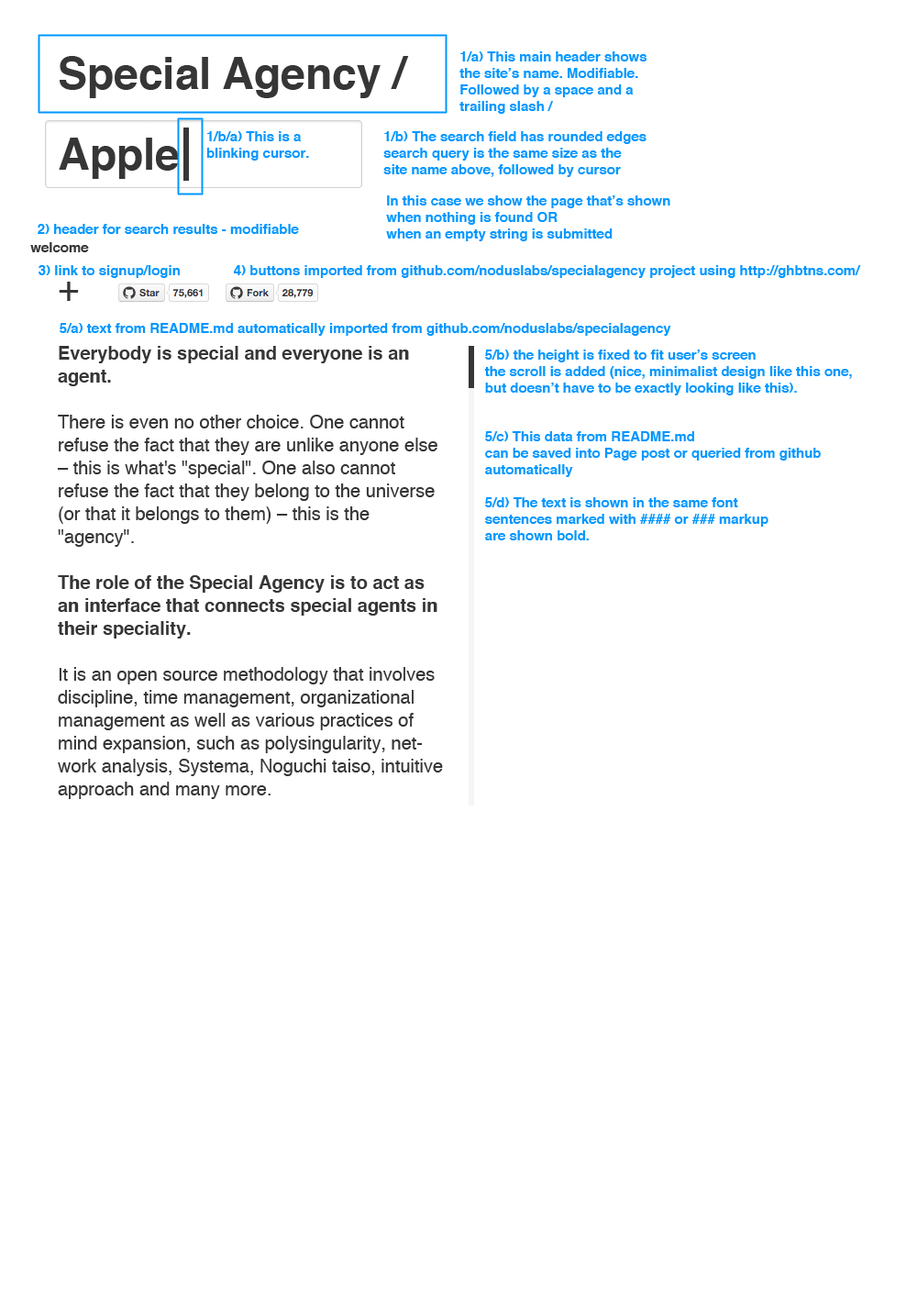
<style>
.page{position:relative;width:917px;height:1300px;background:#ffffff}
.page>*{position:absolute;margin:0}
.t1{font:13.8px "Helvetica-Bold";color:#0096ff}
.t2{font:44px "Helvetica-Bold";color:#363636}
.t3{font:13.8px "Helvetica-Bold";color:#363636}
.t4{font:36.7px "Helvetica";color:#363636}
.t5{font:18.3px/22.9px "Helvetica";color:#363636}
.t6{font:18.3px/22.9px "Helvetica-Bold";color:#363636}
</style>
<div class="page">
<p class="t1" style="left:460px;top:51px;width:188px;height:63px">1/a) This main header shows the site’s name. Modifiable. Followed by a space and a trailing slash /</p>
<p class="t2" style="left:60px;top:56px;width:349px;height:42px">Special Agency /</p>
<p class="t2" style="left:59px;top:138px;width:120px;height:41px">Apple</p>
<p class="t1" style="left:206px;top:131px;width:103px;height:30px">1/b/a) This is a blinking cursor.</p>
<p class="t1" style="left:383px;top:131px;width:264px;height:46px">1/b) The search field has rounded edges<br>search query is the same size as the<br>site name above, followed by cursor</p>
<p class="t1" style="left:386px;top:195px;width:285px;height:46px">In this case we show the page that’s shown<br>when nothing is found OR<br>when an empty string is submitted</p>
<p class="t1" style="left:38px;top:224px;width:261px;height:10px">2) header for search results - modifiable</p>
<p class="t3" style="left:30px;top:242px;width:59px;height:10px">welcome</p>
<p class="t1" style="left:39px;top:265px;width:141px;height:13px">3) link to signup/login</p>
<p class="t1" style="left:233px;top:265px;width:628px;height:13px">4) buttons imported from github.com/noduslabs/specialagency project using http://ghbtns.com/</p>
<p class="t4" style="left:59px;top:282px;width:20px;height:19px">+</p>
<p class="t1" style="left:60px;top:323px;width:611px;height:13px">5/a) text from README.md automatically imported from github.com/noduslabs/specialagency</p>
<p class="t5" style="left:57px;top:346px;width:386px;height:453px"><span class="t6">Everybody is special and everyone is an agent.<br></span><br>There is even no other choice. One cannot refuse the fact that they are unlike anyone else – this is what's "special". One also cannot refuse the fact that they belong to the universe (or that it belongs to them) – this is the "agency".<br><span class="t6"><br>The role of the Special Agency is to act as an interface that connects special agents in their speciality.<br></span><br>It is an open source methodology that involves discipline, time management, organizational management as well as various practices of mind expansion, such as polysingularity, network analysis, Systema, Noguchi taiso, intuitive approach and many more.</p>
<p class="t1" style="left:484px;top:350px;width:368px;height:45px">5/b) the height is fixed to fit user’s screen<br>the scroll is added (nice, minimalist design like this one,<br>but doesn’t have to be exactly looking like this).</p>
<p class="t1" style="left:485px;top:431px;width:336px;height:109px">5/c) This data from README.md <br>can be saved into Page post or queried from github<br>automatically<br><br>5/d) The text is shown in the same font<br>sentences marked with #### or ### markup <br>are shown bold.</p>
</div>
